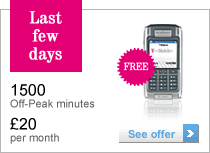
<style>
.page{position:relative;width:210px;height:153px;background:#ffffff}
.page>*{position:absolute;margin:0}
.t1{font:18px/18px "Tele-Antiqua";color:#ffffff;font-weight:bold}
.t2{font:11px/12px "ArialMT";color:#606060}
.t3{font:16px/12px "ArialMT";color:#000000}
.t4{font:11px "Arial-BoldMT";color:#5ba4db}
</style>
<div class="page">
<p class="t1" style="left:29px;top:11px;width:33px;height:52px;text-align:center">Last few days</p>
<p class="t2" style="left:10px;top:84px;width:85px;height:24px"><span class="t3">1500<br></span>Off-Peak minutes</p>
<p class="t2" style="left:10px;top:117px;width:49px;height:27px"><span class="t3">£20<br></span>per month</p>
<p class="t4" style="left:128px;top:130px;width:48px;height:8px">See offer</p>
</div>
